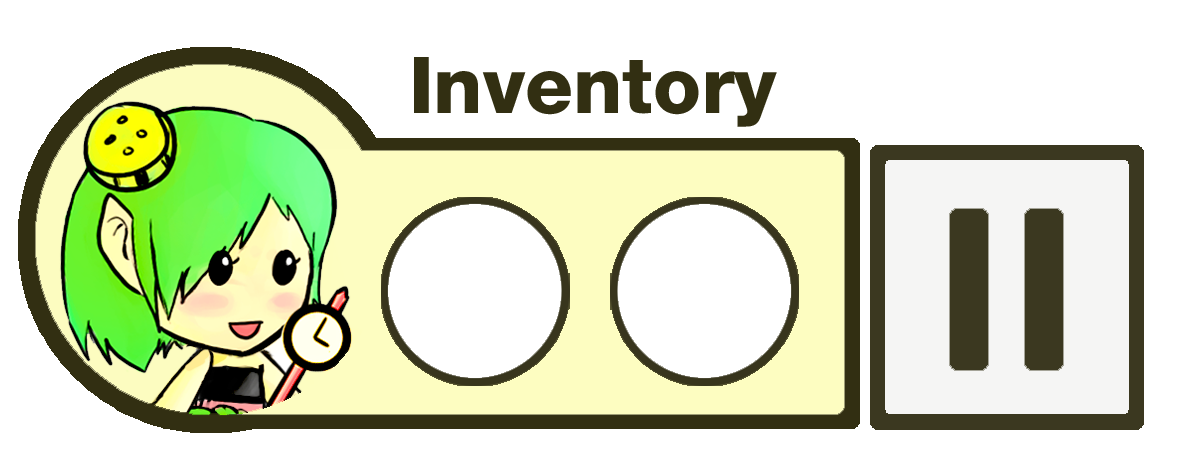
<style>
.page{position:relative;width:1177px;height:460px;background:#ffffff}
.page>*{position:absolute;margin:0}
.t1{font:78.5px "Helvetica85-Heavy";color:#322f12}
</style>
<div class="page">
<p class="t1" style="left:414px;top:57px;width:363px;height:70px">Inventory</p>
</div>
